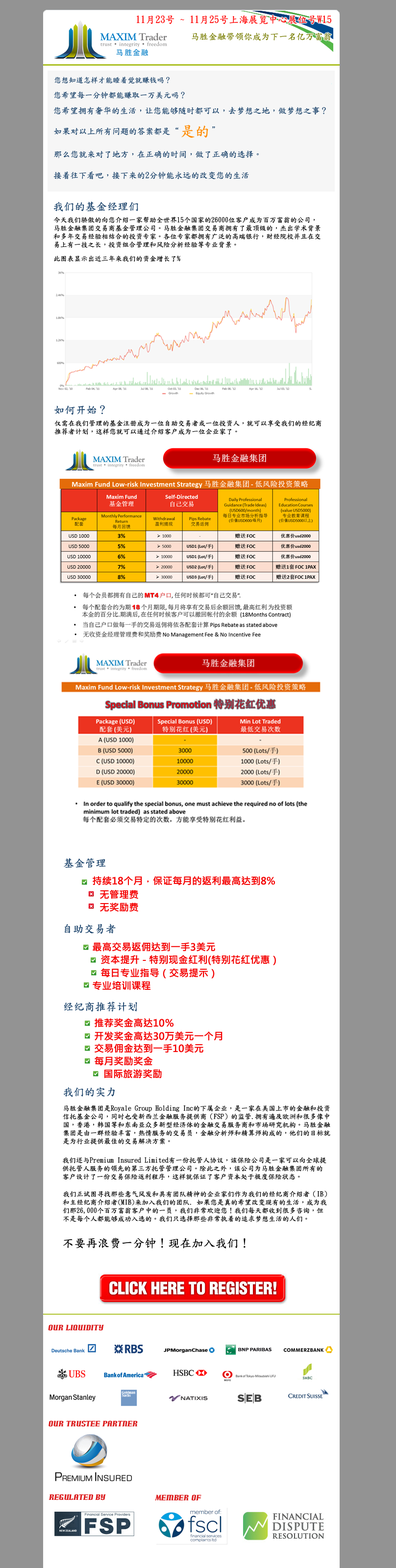
<style>
.page{position:relative;width:396px;height:1568px;background:#ffffff}
.page>*{position:absolute;margin:0}
.t1{font:9.8px "DFKaiShu-SB-Estd-BF";color:#ff0000}
.t2{font:8.8px "DFKaiShu-SB-Estd-BF";color:#777c00}
.t3{font:7.3px "DFKaiShu-SB-Estd-BF";color:#163f68}
.t4{font:7.8px "DFKaiShu-SB-Estd-BF";color:#163f68}
.t5{font:8.3px "DFKaiShu-SB-Estd-BF";color:#163f68}
.t6{font:14.7px "DFKaiShu-SB-Estd-BF";color:#ff8a00}
.t7{font:10.8px "DFKaiShu-SB-Estd-BF";color:#163f68}
.t8{font:6.9px "DFKaiShu-SB-Estd-BF";color:#040404}
.t9{font:6.9px "DFKaiShu-SB-Estd-BF";color:#010101}
.t10{font:6.9px "DFKaiShu-SB-Estd-BF";color:#000000}
.t11{font:9.8px "MicrosoftJhengHeiBold";color:#f40000}
.t12{font:11.8px "DFKaiShu-SB-Estd-BF";color:#000000}
.t13{font:6.9px "Arnprior";color:#dc1e1f}
</style>
<div class="page">
<p class="t1" style="left:137px;top:15px;width:194px;height:9px">11月23号 ~ 11月25号上海展览中心展位号W15</p>
<p class="t2" style="left:192px;top:32px;width:140px;height:9px">马胜金融带领你成为下一名亿万富翁</p>
<p class="t3" style="left:54px;top:76px;width:116px;height:8px">您想知道怎样才能睡着觉就赚钱吗？</p>
<p class="t4" style="left:54px;top:91px;width:131px;height:8px">您希望每一分钟都能赚取一万美元吗？</p>
<p class="t5" style="left:53px;top:107px;width:273px;height:8px">您希望拥有奢华的生活，让您能够随时都可以，去梦想之地，做梦想之事？</p>
<p class="t6" style="left:181px;top:125px;width:27px;height:13px">是的</p>
<p class="t5" style="left:54px;top:127px;width:124px;height:8px">如果对以上所有问题的答案都是“</p>
<p class="t5" style="left:212px;top:126px;width:3px;height:3px">”</p>
<p class="t5" style="left:54px;top:150px;width:205px;height:8px">那么您就来对了地方，在正确的时间，做了正确的选择。</p>
<p class="t5" style="left:53px;top:172px;width:196px;height:7px">接着往下看吧，接下来的2分钟能永远的改变您的生活</p>
<p class="t7" style="left:53px;top:201px;width:85px;height:11px">我们的基金经理们</p>
<p class="t8" style="left:53px;top:217px;width:267px;height:31px">今天我们骄傲的向您介绍一家帮助全世界15个国家的26000位客户成为百万富翁的公司，<br>马胜金融集团交易商基金管理公司。马胜金融集团交易商拥有了最顶级的，杰出学术背景<br>和多年交易经验相结合的投资专家。各位专家都拥有广泛的高端银行，财经院校并且在交<br>易上有一技之长，投资组合管理和风险分析经验等专业背景。</p>
<p class="t9" style="left:54px;top:255px;width:126px;height:7px">此图表显示出近三年来我们的资金增长了%</p>
<p class="t7" style="left:54px;top:405px;width:51px;height:10px">如何开始？</p>
<p class="t10" style="left:54px;top:420px;width:267px;height:15px">仅需在我们管理的基金注册成为一位自助交易者或一位投资人，就可以享受我们的经纪商<br>推荐者计划，这样您就可以通过介绍客户成为一位企业家了。</p>
<p class="t7" style="left:64px;top:858px;width:42px;height:10px">基金管理</p>
<p class="t11" style="left:93px;top:876px;width:182px;height:9px">持续18个月，保证每月的返利最高达到8%</p>
<p class="t11" style="left:100px;top:890px;width:38px;height:9px">无管理费</p>
<p class="t11" style="left:100px;top:903px;width:38px;height:9px">无奖励费</p>
<p class="t7" style="left:65px;top:924px;width:51px;height:10px">自助交易者</p>
<p class="t11" style="left:93px;top:942px;width:122px;height:10px">最高交易返佣达到一手3美元</p>
<p class="t11" style="left:101px;top:955px;width:175px;height:10px">资本提升 - 特别现金红利(特别花红优惠）</p>
<p class="t11" style="left:101px;top:968px;width:114px;height:11px">每日专业指导（交易提示）</p>
<p class="t11" style="left:93px;top:981px;width:57px;height:9px">专业培训课程</p>
<p class="t7" style="left:64px;top:1002px;width:73px;height:10px">经纪商推荐计划</p>
<p class="t11" style="left:95px;top:1018px;width:78px;height:10px">推荐奖金高达10％</p>
<p class="t11" style="left:95px;top:1031px;width:127px;height:10px">开发奖金高达30万美元一个月</p>
<p class="t11" style="left:95px;top:1044px;width:108px;height:9px">交易佣金达到一手10美元</p>
<p class="t11" style="left:95px;top:1056px;width:57px;height:10px">每月奖励奖金</p>
<p class="t11" style="left:104px;top:1069px;width:58px;height:9px">国际旅游奖励</p>
<p class="t7" style="left:63px;top:1087px;width:52px;height:10px">我们的实力</p>
<p class="t10" style="left:63px;top:1105px;width:267px;height:40px">马胜金融集团是Royale Group Holding Inc的下属企业，是一家在美国上市的金融和投资<br>信托基金公司，同时也受新西兰金融服务提供商（FSP）的监管.拥有遍及欧洲和很多像中<br>国，香港，韩国等和东南亚众多新型经济体的金融交易服务商和市场研究机构。马胜金融<br>集团是由一群经验丰富，热情服务的交易员，金融分析师和精算师构成的，他们的目标就<br>是为行业提供最佳的交易解决方案。</p>
<p class="t10" style="left:62px;top:1157px;width:264px;height:23px">我们还与Premium Insured Limited有一份托管人协议，该保险公司是一家可以向全球提<br>供托管人服务的领先的第三方托管管理公司。除此之外，该公司为马胜金融集团所有的<br>客户设计了一份交易保险返利程序，这样就保证了客户资本处于极度保险状态。</p>
<p class="t10" style="left:63px;top:1191px;width:264px;height:31px">我们正试图寻找那些意气风发和具有团队精神的企业家们作为我们的经纪商介绍者（IB）<br>和主经纪商介绍者(MIB)来加入我们的团队. 如果您是真的希望改变现有的生活，成为我<br>们那26,000个百万富翁客户中的一员，我们非常欢迎您！我们每天都收到很多咨询，但<br>不是每个人都能够成功入选的。我们只选择那些非常执着的追求梦想生活的人们。</p>
<p class="t12" style="left:63px;top:1238px;width:182px;height:11px">不要再浪费一分钟！现在加入我们！</p>
<p class="t13" style="left:48px;top:1324px;width:56px;height:7px">Our Liquidity</p>
<p class="t13" style="left:49px;top:1421px;width:89px;height:6px">Our Trustee Partner</p>
<p class="t13" style="left:49px;top:1494px;width:57px;height:6px">Regulated by</p>
<p class="t13" style="left:155px;top:1494px;width:46px;height:7px">Member Of</p>
</div>
